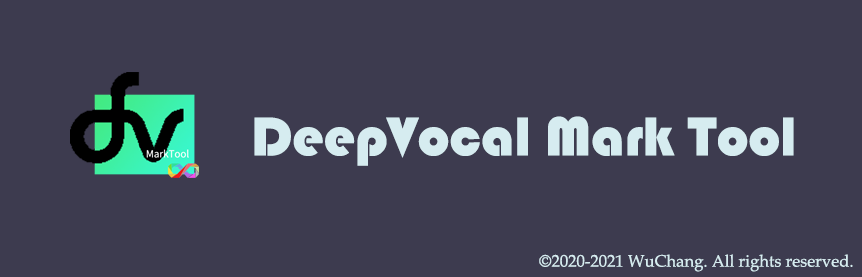
<style>
.page{position:relative;width:862px;height:277px;background:#3d3b4f}
.page>*{position:absolute;margin:0}
.t1{font:56.7px "Bauhaus93";color:#d6ecf0}
.t2{font:16.7px "BookAntiqua";color:#d6ecf0}
</style>
<div class="page">
<p class="t1" style="left:254px;top:116px;width:540px;height:50px">DeepVocal Mark Tool</p>
<p class="t2" style="left:539px;top:254px;width:314px;height:18px">©2020-2021 WuChang. All rights reserved.</p>
</div>
